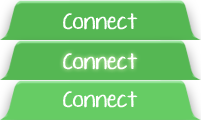
<style>
.page{position:relative;width:201px;height:120px;background:#55b753}
.page>*{position:absolute;margin:0}
.t1{font:16px "KGTenThousandReasons";color:#ffffff;font-weight:bold}
</style>
<div class="page">
<p class="t1" style="left:63px;top:13px;width:75px;height:17px">Connect</p>
<p class="t1" style="left:63px;top:53px;width:75px;height:17px">Connect</p>
<p class="t1" style="left:63px;top:91px;width:75px;height:17px">Connect</p>
</div>
